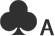
<style>
.page{position:relative;width:55px;height:36px;background:#ffffff}
.page>*{position:absolute;margin:0}
.t1{font:23.4px "MyriadPro-Regular";letter-spacing:-0.1em;color:#303030;font-weight:bold}
</style>
<div class="page">
<p class="t1" style="left:40px;top:19px;width:14px;height:17px">A</p>
</div>
